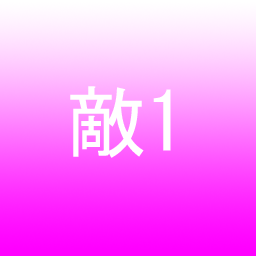
<style>
.page{position:relative;width:256px;height:256px}
.page>*{position:absolute;margin:0}
.t1{font:80px "MS-Gothic";color:#ffffff}
</style>
<div class="page">
<p class="t1" style="left:70px;top:86px;width:101px;height:72px">敵1</p>
</div>
